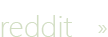
<style>
.page{position:relative;width:108px;height:37px;background:#ffffff}
.page>*{position:absolute;margin:0}
.t1{font:30px "SegoeUI-Light";color:#d2dec3}
.t2{font:24px "SegoeUI-Light";color:#d2dec3}
</style>
<div class="page">
<p class="t1" style="left:1px;top:15px;width:71px;height:22px">reddit</p>
<p class="t2" style="left:98px;top:25px;width:9px;height:8px">»</p>
</div>
